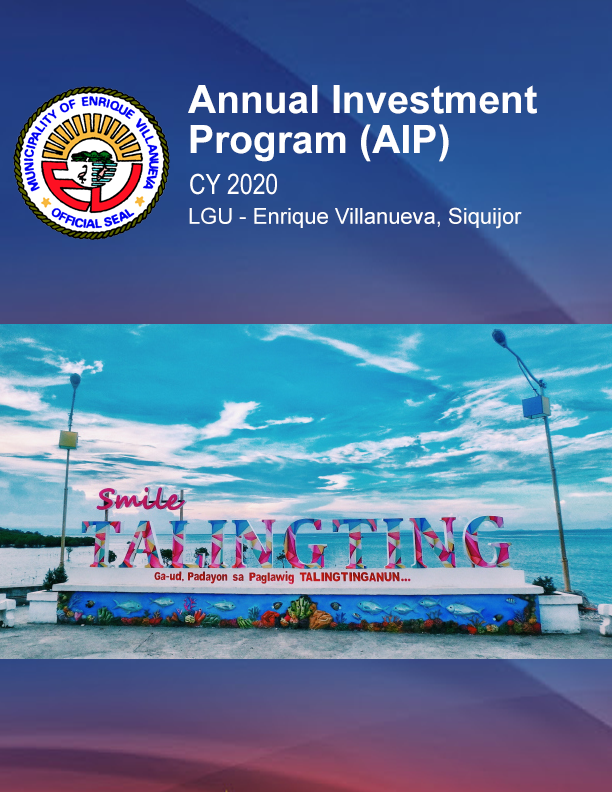
<style>
.page{position:relative;width:612px;height:792px}
.page>*{position:absolute;margin:0}
.t1{font:39px "Arial-BoldMT";color:#ffffff}
.t2{font:28px "ArialNarrow";color:#ffffff}
.t3{font:22px "ArialMT";color:#ffffff}
</style>
<div class="page">
<p class="t1" style="left:188px;top:85px;width:349px;height:29px">Annual Investment</p>
<p class="t1" style="left:190px;top:124px;width:259px;height:38px">Program (AIP)</p>
<p class="t2" style="left:190px;top:173px;width:87px;height:22px">CY 2020</p>
<p class="t3" style="left:189px;top:207px;width:333px;height:22px">LGU - Enrique Villanueva, Siquijor</p>
</div>
